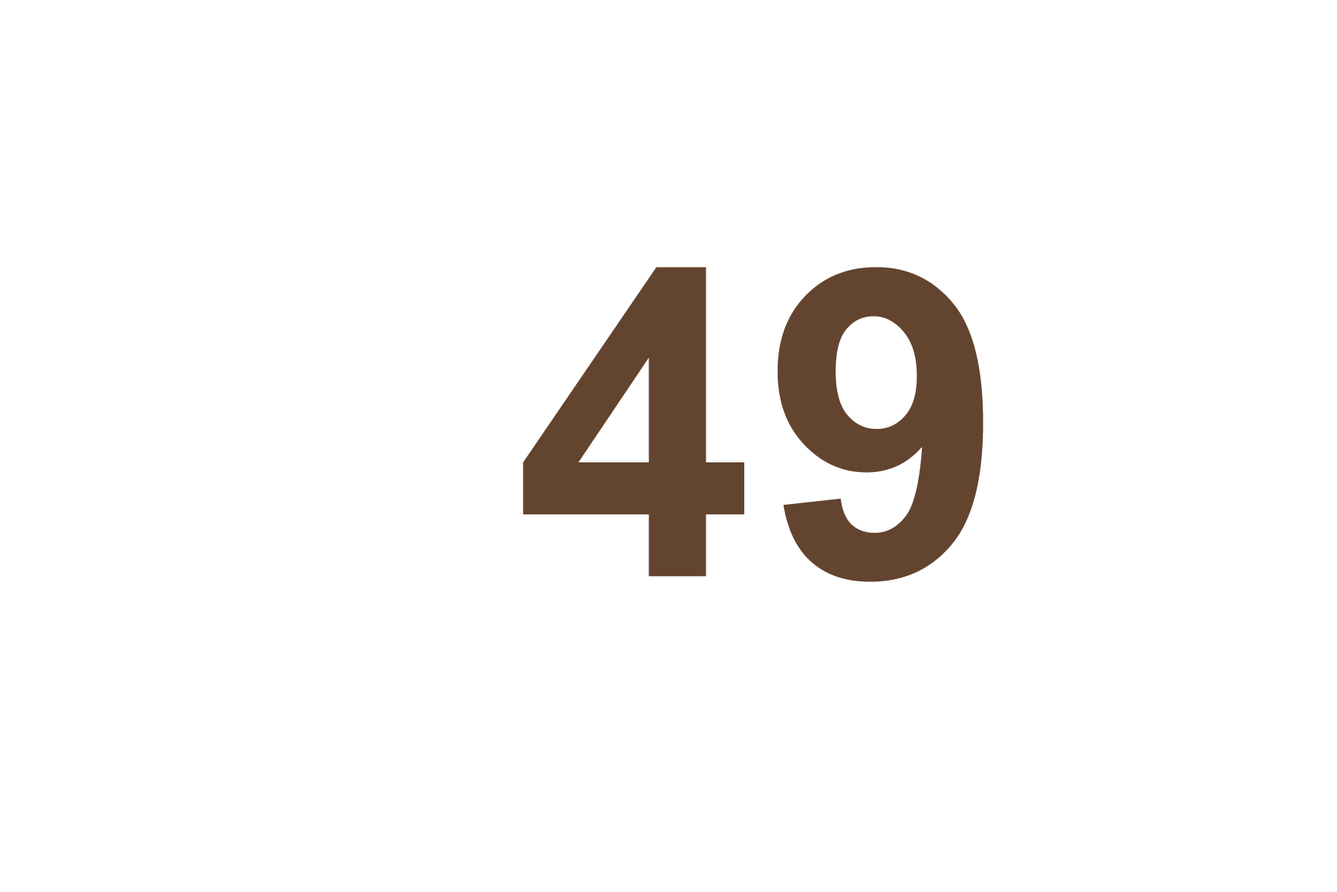
<style>
.page{position:relative;width:1337px;height:892px;background:#ffffff}
.page>*{position:absolute;margin:0}
.t1{font:429.6px "Arial-BoldMT";color:#63442f}
</style>
<div class="page">
<p class="t1" style="left:523px;top:267px;width:461px;height:315px">49</p>
</div>
